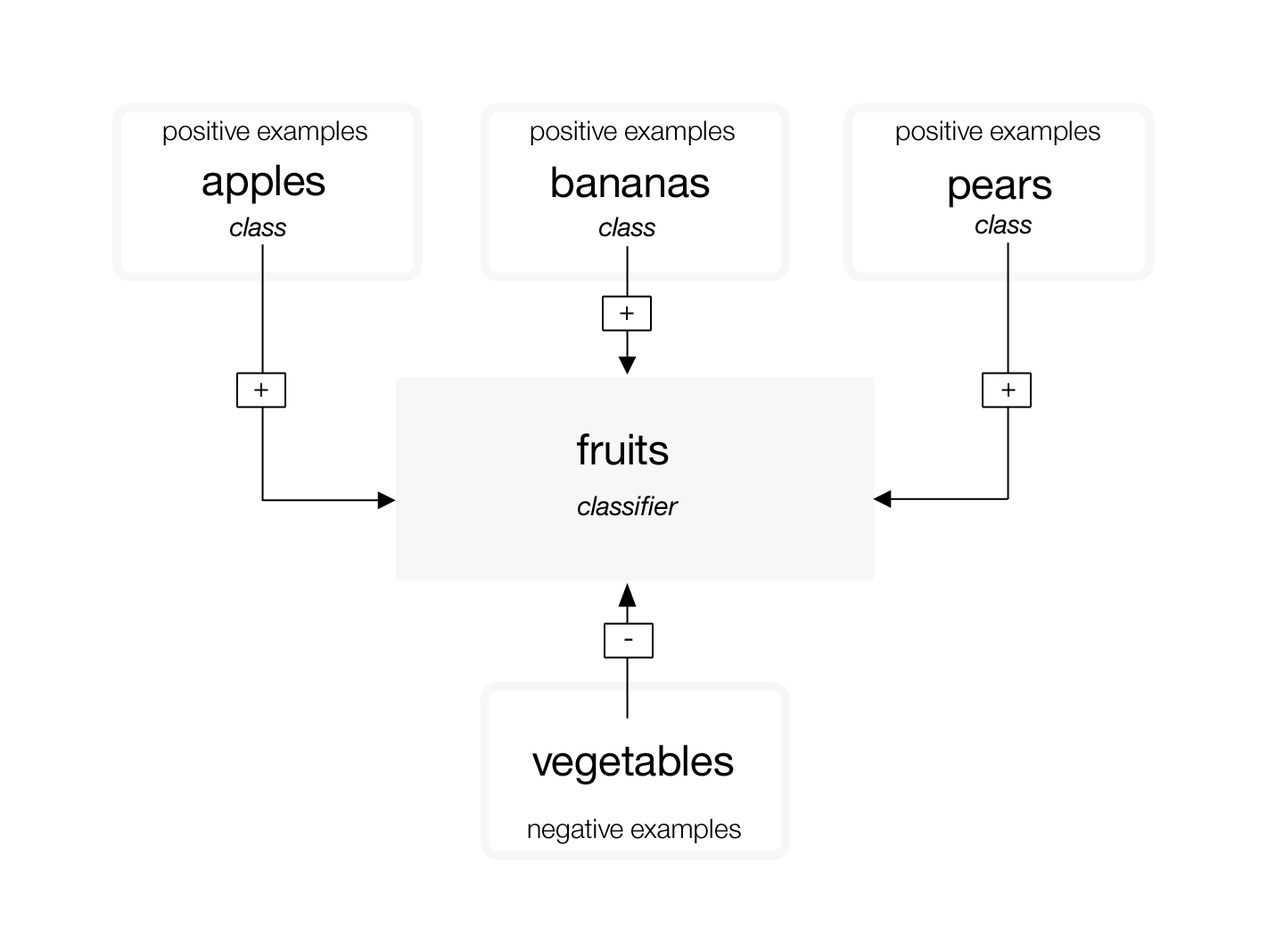
<style>
.page{position:relative;width:1284px;height:928px;background:#ffffff}
.page>*{position:absolute;margin:0}
.t1{font:26.8px "HelvNeueforIBM-Light";color:#000000}
.t2{font:42.8px "HelvNeueforIBM";color:#000000}
.t3{font:26.8px "HelvNeueforIBM-Italic";color:#000000}
.t4{font:26.8px "HelvNeueforIBM";color:#000000}
</style>
<div class="page">
<p class="t1" style="left:163px;top:120px;width:204px;height:25px">positive examples</p>
<p class="t1" style="left:531px;top:120px;width:204px;height:25px">positive examples</p>
<p class="t1" style="left:896px;top:120px;width:205px;height:25px">positive examples</p>
<p class="t2" style="left:202px;top:164px;width:124px;height:40px">apples</p>
<p class="t2" style="left:552px;top:166px;width:158px;height:32px">bananas</p>
<p class="t2" style="left:949px;top:176px;width:103px;height:32px">pears</p>
<p class="t3" style="left:230px;top:217px;width:56px;height:20px">class</p>
<p class="t3" style="left:599px;top:217px;width:57px;height:20px">class</p>
<p class="t3" style="left:976px;top:214px;width:56px;height:21px">class</p>
<p class="t4" style="left:620px;top:306px;width:14px;height:14px">+</p>
<p class="t4" style="left:254px;top:383px;width:14px;height:14px">+</p>
<p class="t4" style="left:1002px;top:383px;width:14px;height:14px">+</p>
<p class="t2" style="left:577px;top:433px;width:92px;height:33px">fruits</p>
<p class="t3" style="left:578px;top:496px;width:101px;height:20px">classifier</p>
<p class="t4" style="left:624px;top:639px;width:9px;height:2px">-</p>
<p class="t2" style="left:532px;top:745px;width:202px;height:40px">vegetables</p>
<p class="t1" style="left:528px;top:819px;width:213px;height:26px">negative examples</p>
</div>
